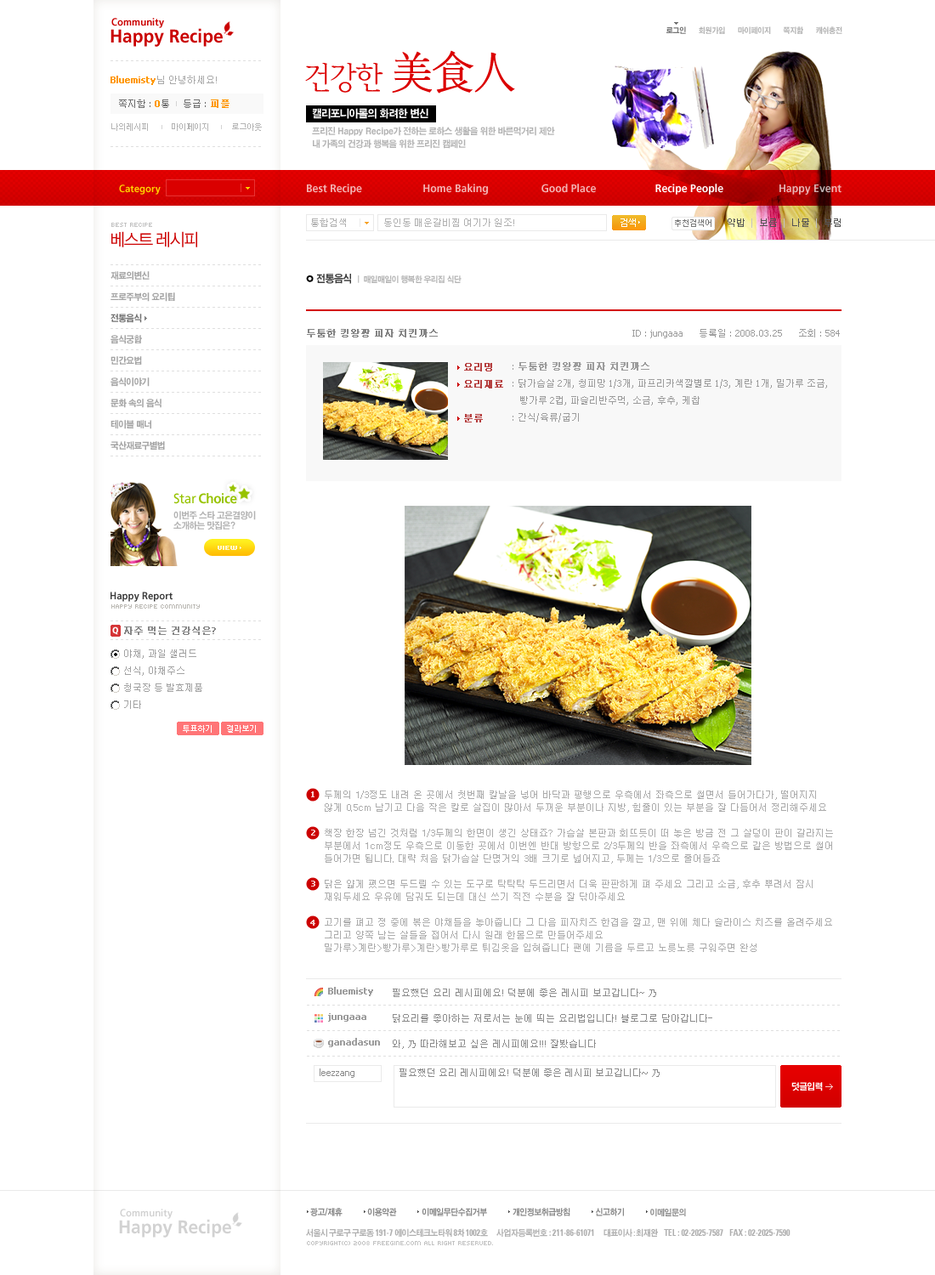
<style>
.page{position:relative;width:935px;height:1275px;background:#ffffff}
.page>*{position:absolute;margin:0}
.t1{font:18.7px/17px "Frutiger-Bold";color:#ca0000;scale:0.95 1}
.t2{font:10.2px/17px "Frutiger-Bold";letter-spacing:-0.1em;color:#ca0000;scale:0.95 1}
.t3{font:10.2px/17px "Frutiger-Bold";color:#ca0000;scale:0.95 1}
.t4{font:7.7px "H2gtrE";letter-spacing:-0.03em;color:#b4b4b4;scale:0.9 1}
.t5{font:7.7px "H2gtrE";letter-spacing:-0.03em;color:#767676;scale:0.9 1}
.t6{font:30.6px "YDIYMjO220";letter-spacing:-0.05em;color:#db0000}
.t7{font:47.6px "YDIYMjO230";letter-spacing:-0.05em;color:#db0000;scale:0.95 1}
.t8{font:9.4px "Tahoma";color:#ff9700;font-weight:bold}
.t9{font:9.4px "Dotum";color:#aaaaaa}
.t10{font:9.4px "Tahoma";color:#aaaaaa}
.t11{font:9.4px "Dotum";color:#6d6d6d}
.t12{font:9.4px "Tahoma";color:#6d6d6d}
.t13{font:9.4px "Dotum";color:#ff9700;font-weight:bold}
.t14{font:8.5px "YDIWebDotum";color:#b5b5b5}
.t15{font:10.2px "Frutiger-Bold";color:#ffd200;scale:0.95 1}
.t16{font:11.1px "Frutiger-Bold";color:#f2b3b3;scale:0.95 1}
.t17{font:11.1px "Frutiger-Bold";color:#f4b3b3;scale:0.95 1}
.t18{font:11.1px "Frutiger-Bold";color:#ffffff;scale:0.95 1}
.t19{font:11.1px "Frutiger-Bold";color:#e6b3b3;scale:0.95 1}
.t20{font:9.4px "Dotum";color:#b2b2b2}
.t21{font:9.4px "Tahoma";color:#b2b2b2}
.t22{font:9.4px "YDIWebDotum";color:#ffffff}
.t23{font:8.5px "YDIWebDotum";color:#7a7a7a}
.t24{font:9.4px "Dotum";color:#555555}
.t25{font:9.4px "Tahoma";color:#c4c4c4}
.t26{font:6.8px "Kroeger0555";color:#c2c2c2}
.t27{font:17px "YDIWebDotum";letter-spacing:-0.05em;color:#cc0000;scale:0.95 1}
.t28{font:8.9px/21.3px "H2gtrE";letter-spacing:-0.05em;color:#a4a4a4;scale:0.92 1}
.t29{font:8.9px/21.3px "H2gtrE";letter-spacing:-0.05em;color:#717171;scale:0.92 1}
.t30{font:8.1px "H2gtrE";letter-spacing:-0.05em;color:#b3b3b3;scale:0.92 1}
.t31{font:10.2px "H2gtrE";letter-spacing:-0.05em;color:#3c3c3c;scale:0.92 1}
.t32{font:9.4px "Dotum";color:#858585;font-weight:bold}
.t33{font:9.4px "Tahoma";color:#9c9c9c}
.t34{font:9.4px "Dotum";color:#9c9c9c}
.t35{font:9.4px/17px "Dotum";color:#b64040;font-weight:bold}
.t36{font:9.4px/17px "Dotum";color:#9c9c9c;font-weight:bold}
.t37{font:9.4px/17px "Tahoma";color:#9c9c9c}
.t38{font:9.4px/17px "Dotum";color:#9c9c9c}
.t39{font:13.6px "Frutiger-Bold";letter-spacing:-0.02em;color:#97c300;scale:0.95 1}
.t40{font:13.6px "Frutiger-Roman";letter-spacing:-0.02em;color:#97c300;scale:0.95 1}
.t41{font:8.9px/10.2px "H2gtrE";letter-spacing:-0.05em;color:#b3b3b3;scale:0.92 1}
.t42{font:6.8px "Kroeger0555";color:#fff7cf;font-weight:bold}
.t43{font:10.2px "Frutiger-Bold";color:#3c3c3c;scale:0.95 1}
.t44{font:6.8px "Kroeger0555";color:#bcbab5}
.t45{font:8.5px "Frutiger-Black";color:#ffffff;scale:0.95 1}
.t46{font:9.4px "Dotum";color:#888888;font-weight:bold}
.t47{font:9.4px "Tahoma";color:#888888;font-weight:bold}
.t48{font:9.4px/17px "Dotum";color:#a3a3a3}
.t49{font:9.4px/17px "Tahoma";color:#a3a3a3}
.t50{font:8.5px "YDIWebDotum";color:#ffffff}
.t51{font:8.5px "Tahoma";color:#f5cccc;font-weight:bold}
.t52{font:9.4px/12.8px "Dotum";color:#acacac}
.t53{font:9.4px/25.5px "Tahoma";color:#9c9c9c;font-weight:bold}
.t54{font:9.4px/25.5px "Dotum";color:#8c8c8c}
.t55{font:9.4px "Dotum";color:#8c8c8c}
.t56{font:9.4px "Tahoma";color:#8c8c8c}
.t57{font:8.9px "H2gtrE";letter-spacing:-0.05em;color:#ffffff;scale:0.92 1}
.t58{font:8.5px "H2gtrE";letter-spacing:-0.05em;color:#8a8a8a;scale:0.9 1}
.t59{font:8.5px "H2gtrE";letter-spacing:-0.05em;color:#919191;scale:0.9 1}
.t60{font:9.4px "Univeconbol";letter-spacing:-0.01em;color:#b0b0b0;scale:0.9 1}
.t61{font:8.5px "H2gtrE";letter-spacing:-0.05em;color:#b0b0b0;scale:0.9 1}
.t62{font:8.5px "Univeconbol";letter-spacing:-0.05em;color:#b0b0b0;scale:0.9 1}
.t63{font:6.8px "Kroeger0555";color:#c3c3c3}
</style>
<div class="page">
<p class="t1" style="left:111px;top:18px;width:112px;height:29px"><span class="t2"> </span><span class="t3">Community<br></span>Happy Recipe</p>
<p class="t4" style="left:666px;top:26px;width:176px;height:8px"><span class="t5">로그인</span>      회원가입      마이페이지      쪽지함      캐쉬충전</p>
<p class="t6" style="left:305px;top:50px;width:210px;height:44px">건강한 <span class="t7">美食人</span></p>
<p class="t8" style="left:111px;top:76px;width:106px;height:9px">Bluemisty<span class="t9">님 안녕하세요</span><span class="t10">!</span></p>
<p class="t11" style="left:119px;top:99px;width:111px;height:9px">쪽지함<span class="t12"> : </span><span class="t8">0</span>통     등급<span class="t12"> : </span><span class="t13">피플</span></p>
<p class="t14" style="left:111px;top:123px;width:151px;height:8px">나의레시피             마이페이지             로그아웃</p>
<p class="t15" style="left:119px;top:184px;width:42px;height:11px">Category</p>
<p class="t16" style="left:307px;top:184px;width:55px;height:11px">Best Recipe</p>
<p class="t17" style="left:423px;top:184px;width:65px;height:11px">Home Baking</p>
<p class="t17" style="left:542px;top:184px;width:54px;height:9px">Good Place</p>
<p class="t18" style="left:655px;top:184px;width:68px;height:11px">Recipe People</p>
<p class="t19" style="left:780px;top:184px;width:62px;height:11px">Happy Event</p>
<p class="t20" style="left:311px;top:218px;width:203px;height:9px">통합검색              동인동 매운갈비찜 여기가 원조<span class="t21">!</span></p>
<p class="t22" style="left:621px;top:218px;width:15px;height:9px">검색</p>
<p class="t23" style="left:675px;top:219px;width:37px;height:8px">추천검색어</p>
<p class="t24" style="left:728px;top:218px;width:113px;height:10px">약밥  <span class="t25">|  </span>보름  <span class="t25">|  </span>나물  <span class="t25">|  </span>부럼</p>
<p class="t26" style="left:111px;top:223px;width:41px;height:4px">Best Recipe</p>
<p class="t27" style="left:111px;top:231px;width:86px;height:16px">베스트 레시피</p>
<p class="t28" style="left:111px;top:271px;width:64px;height:180px">재료의변신<br>프로주부의 요리팁<br><span class="t29">전통음식<br></span>음식궁합<br>민간요법<br>음식이야기<br>문화 속의 음식<br>테이블 매너<br>국산재료구별법</p>
<p class="t30" style="left:316px;top:274px;width:146px;height:10px"><span class="t31">전통음식  </span>|  매일매일이 행복한 우리집 식단</p>
<p class="t32" style="left:307px;top:329px;width:533px;height:9px">두툼한 킹왕짱 피자 치킨까스                                             <span class="t33"> ID : jungaaa      </span><span class="t34">등록일</span><span class="t33"> : 2008.03.25      </span><span class="t34">조회</span><span class="t33"> : 584</span></p>
<p class="t35" style="left:464px;top:363px;width:39px;height:60px">요리명<br>요리재료<br><br>분류</p>
<p class="t36" style="left:513px;top:362px;width:314px;height:61px"><span class="t37">: </span>두툼한 킹왕짱 피자 치킨까스<br><span class="t37">: </span><span class="t38">닭가슴살</span><span class="t37"> 2</span><span class="t38">개</span><span class="t37">, </span><span class="t38">청피망</span><span class="t37"> 1/3</span><span class="t38">개</span><span class="t37">, </span><span class="t38">파프리카색깔별로</span><span class="t37"> 1/3, </span><span class="t38">계란</span><span class="t37"> 1</span><span class="t38">개</span><span class="t37">, </span><span class="t38">밀가루 조금</span><span class="t37">, <br>   </span><span class="t38">빵가루</span><span class="t37"> 2</span><span class="t38">컵</span><span class="t37">, </span><span class="t38">파슬리반주먹</span><span class="t37">, </span><span class="t38">소금</span><span class="t37">, </span><span class="t38">후추</span><span class="t37">, </span><span class="t38">케찹</span><span class="t37"><br>: </span><span class="t38">간식</span><span class="t37">/</span><span class="t38">육류</span><span class="t37">/</span><span class="t38">굽기</span></p>
<p class="t39" style="left:173px;top:493px;width:64px;height:11px"><span class="t40">Star </span>Choice</p>
<p class="t41" style="left:173px;top:511px;width:83px;height:19px">이번주 스타 고은결양이 <br>소개하는 맛집은?</p>
<p class="t42" style="left:218px;top:546px;width:19px;height:4px">view</p>
<p class="t43" style="left:111px;top:592px;width:62px;height:10px">Happy Report</p>
<p class="t44" style="left:111px;top:604px;width:89px;height:5px">Happy Recipe community</p>
<p class="t45" style="left:112px;top:627px;width:6px;height:8px">Q</p>
<p class="t46" style="left:124px;top:627px;width:92px;height:8px">자주 먹는 건강식은<span class="t47">?</span></p>
<p class="t48" style="left:124px;top:649px;width:78px;height:60px">야채<span class="t49">, </span>과일 샐러드<br>선식<span class="t49">, </span>야채주스<br>청국장 등 발효제품<br>기타</p>
<p class="t50" style="left:183px;top:725px;width:29px;height:8px">투표하기</p>
<p class="t50" style="left:227px;top:725px;width:29px;height:8px">결과보기</p>
<p class="t51" style="left:311px;top:791px;width:4px;height:6px">1</p>
<p class="t52" style="left:325px;top:791px;width:508px;height:161px">두께의 1/3정도 내려 온 곳에서 첫번째 칼날을 넣어 바닥과 평행으로 우측에서 좌측으로 썰면서 들어가다가, 떨어지지 <br>않게 0.5cm 남기고 다음 작은 칼로 살집이 많아서 두꺼운 부분이나 지방, 힘줄이 있는 부분을 잘 다듬어서 정리해주세요<br><br>책장 한장 넘긴 것처럼 1/3두께의 한면이 생긴 상태죠? 가슴살 본판과 회뜨듯이 떠 놓은 방금 전 그 살덩이 판이 갈라지는 <br>부분에서 1cm정도 우측으로 이동한 곳에서 이번엔 반대 방향으로 2/3두께의 반을 좌측에서 우측으로 같은 방법으로 썰어 <br>들어가면 됩니다. 대략 처음 닭가슴살 단멵거의 3배 크기로 넓어지고, 두께는 1/3으로 줄어들죠<br><br>닭은 얇게 폈으면 두드릴 수 있는 도구로 탁탁탁 두드리면서 더욱 판판하게 펴 주세요 그리고 소금, 후추 뿌려서 잠시 <br>재워두세요 우유에 담궈도 되는데 대신 쓰기 직전 수분을 잘 닦아주세요<br><br>고기를 펴고 정 중에 볶은 야채들을 놓아줍니다 그 다음 피자치즈 한겹을 깔고, 맨 위에 체다 슬라이스 치즈를 올려주세요 <br>그리고 양쪽 남는 살들을 접어서 다시 원래 한몸으로 만들어주세요<br>밀가루&gt;계란&gt;빵가루&gt;계란&gt;빵가루로 튀김옷을 입혀줍니다 팬에 기름을 두르고 노릇노릇 구워주면 완성</p>
<p class="t51" style="left:311px;top:830px;width:4px;height:6px">2</p>
<p class="t51" style="left:311px;top:881px;width:4px;height:6px">3</p>
<p class="t51" style="left:310px;top:920px;width:5px;height:6px">4</p>
<p class="t53" style="left:328px;top:987px;width:52px;height:60px">Bluemisty<br>jungaaa<br>ganadasun</p>
<p class="t54" style="left:393px;top:989px;width:319px;height:60px">필요했던 요리 레시피에요! 덕분에 좋은 레시피 보고갑니다~ 乃<br>닭요리를 좋아하는 저로서는 눈에 띄는 요리법입니다! 블로그로 담아갑니다-<br>와, 乃 따라해보고 싶은 레시피에요!!! 잘봤습니다</p>
<p class="t55" style="left:320px;top:1069px;width:340px;height:9px"><span class="t56">leezzang                 </span>필요했던 요리 레시피에요<span class="t56">! </span>덕분에 좋은 레시피 보고갑니다<span class="t56">~ </span>乃</p>
<p class="t57" style="left:791px;top:1082px;width:32px;height:10px">덧글입력</p>
<p class="t58" style="left:310px;top:1208px;width:376px;height:9px">광고/제휴            이용약관            이메일무단수집거부            개인정보취급방침            신고하기            <span class="t59">이메일문의</span></p>
<p class="t60" style="left:306px;top:1228px;width:485px;height:10px"><span class="t61">서울시 구로구 구로동</span> 191-7 <span class="t61">에이스테크노타워 </span>8<span class="t61">차 </span>1002<span class="t61">호       사업자등록번호 </span>: 211-86-61071       <span class="t61">대표이사</span><span class="t62"> : </span><span class="t61">최재완     </span>TEL : 02-2025-7587     FAX : 02-2025-7590</p>
<p class="t63" style="left:307px;top:1241px;width:186px;height:4px">Copyright(C) 2008 Freegine.com All Right Reserved.</p>
</div>
